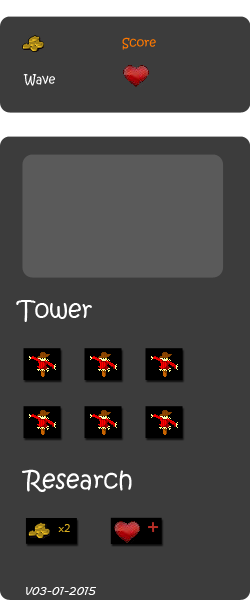
<style>
.page{position:relative;width:250px;height:600px;background:#3c3c3c}
.page>*{position:absolute;margin:0}
.t1{font:12px "KristenITC-Regular";color:#ff7800}
.t2{font:12px "KristenITC-Regular";color:#ffffff}
.t3{font:24px "KristenITC-Regular";color:#ffffff}
.t4{font:11px "MaiandraGD-Regular";color:#daae1f}
.t5{font:11px "MVBoli";color:#ffffff}
</style>
<div class="page">
<p class="t1" style="left:122px;top:37px;width:34px;height:13px">Score</p>
<p class="t2" style="left:23px;top:74px;width:32px;height:12px">Wave</p>
<p class="t3" style="left:16px;top:300px;width:76px;height:22px">Tower</p>
<p class="t3" style="left:22px;top:469px;width:110px;height:23px">Research</p>
<p class="t4" style="left:58px;top:524px;width:12px;height:8px">x2</p>
<p class="t5" style="left:26px;top:587px;width:70px;height:8px">V03-01-2015</p>
</div>
